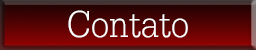
<style>
.page{position:relative;width:256px;height:50px}
.page>*{position:absolute;margin:0}
.t1{font:56.3px "DilleniaUPC";color:#ffffff}
</style>
<div class="page">
<p class="t1" style="left:68px;top:10px;width:120px;height:28px">Contato</p>
</div>
